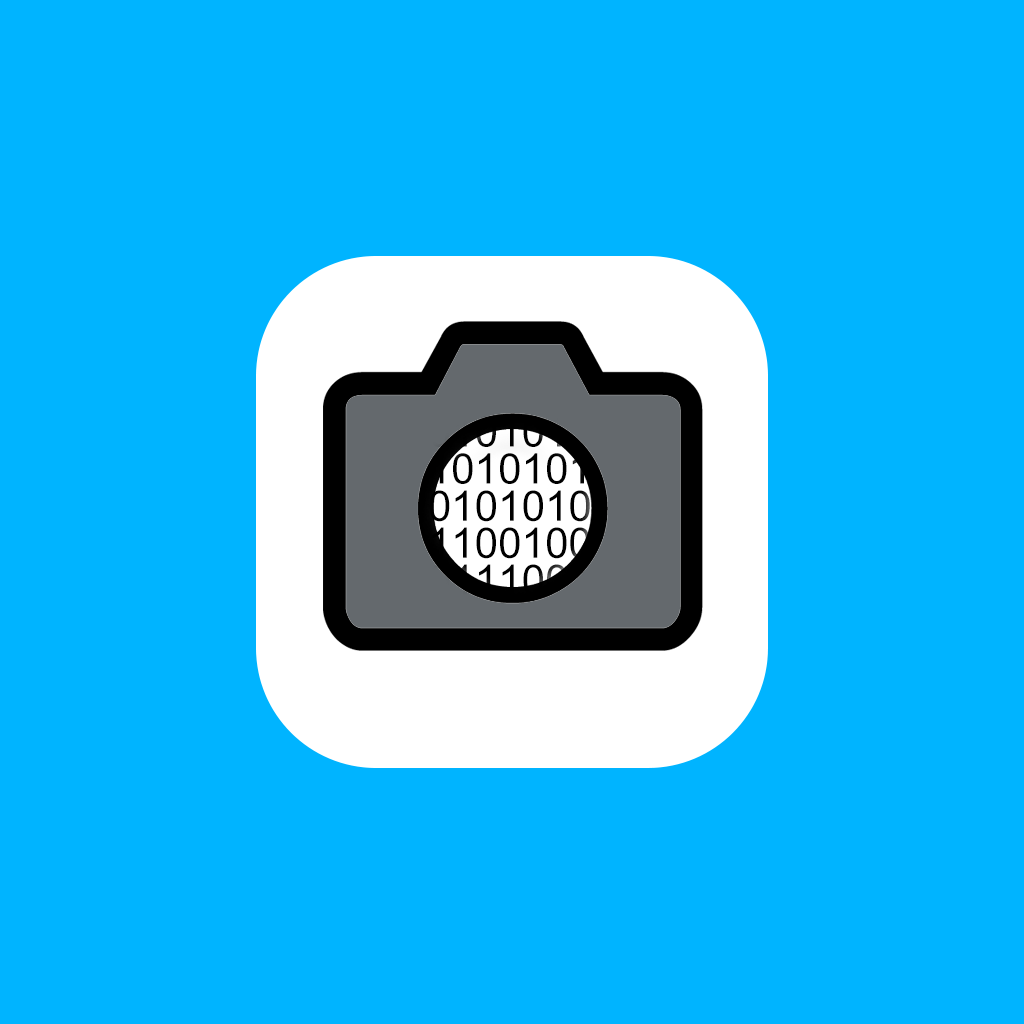
<style>
.page{position:relative;width:1024px;height:1024px;background:#00b4ff}
.page>*{position:absolute;margin:0}
.t1{font:42.2px/37.1px "ArialMT";color:#000000}
</style>
<div class="page">
<p class="t1" style="left:429px;top:416px;width:185px;height:180px">0101010<br>1010101<br>01010100<br>11001001<br>01110011</p>
</div>
